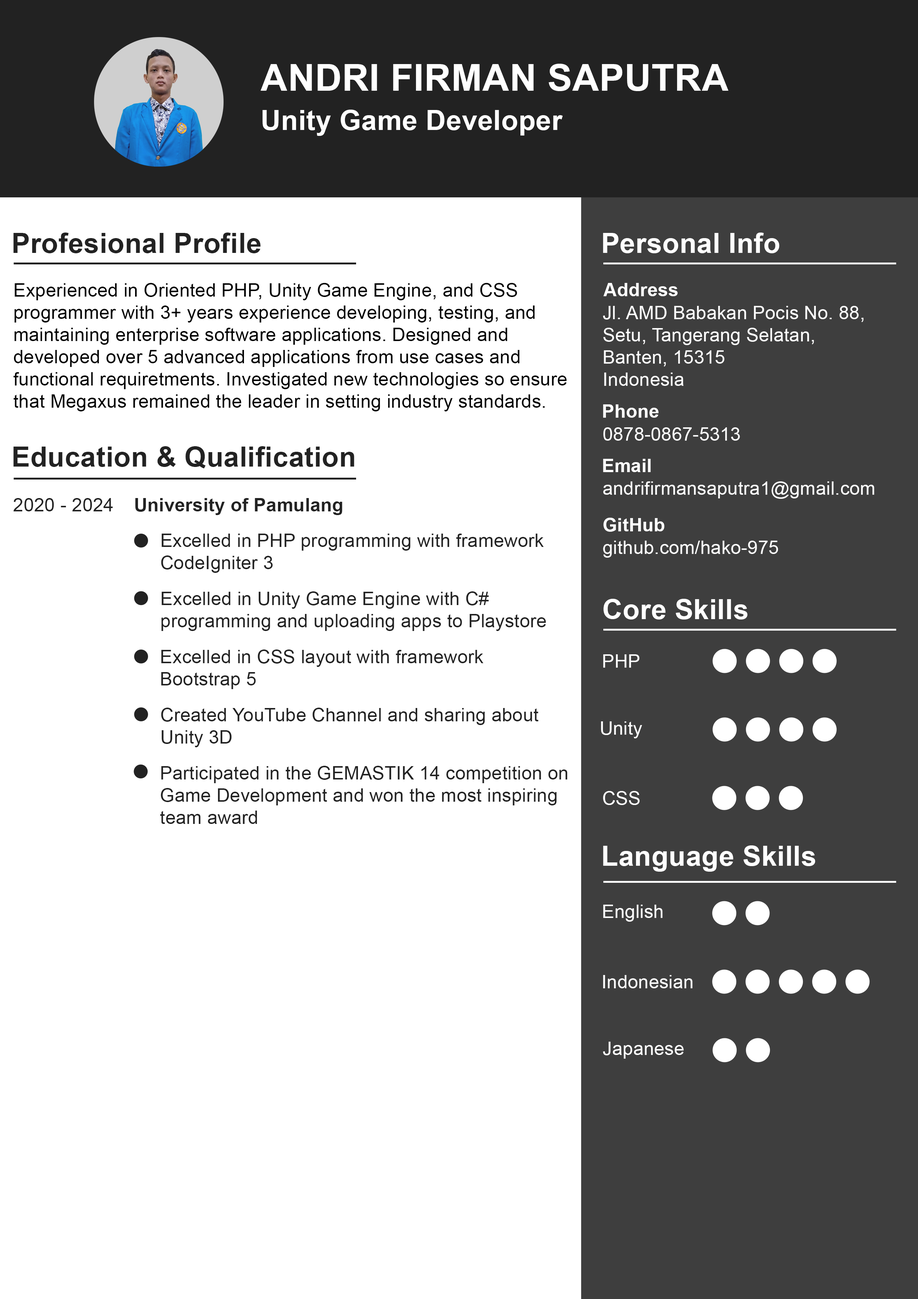
<style>
.page{position:relative;width:918px;height:1299px;background:#ffffff}
.page>*{position:absolute;margin:0}
.t1{font:37px "Arial-BoldMT";letter-spacing:0.01em;color:#ffffff}
.t2{font:27.8px "Arial-BoldMT";letter-spacing:0.01em;color:#ffffff}
.t3{font:27.8px "Arial-BoldMT";letter-spacing:0.01em;color:#222222}
.t4{font:18.5px "ArialMT";letter-spacing:0.01em;color:#000000}
.t5{font:18.5px "Arial-BoldMT";letter-spacing:0.01em;color:#ffffff}
.t6{font:18.5px "ArialMT";letter-spacing:0.01em;color:#ffffff}
.t7{font:18.5px "ArialMT";letter-spacing:0.01em;color:#222222}
.t8{font:18.5px "Arial-BoldMT";letter-spacing:0.01em;color:#222222}
</style>
<div class="page">
<p class="t1" style="left:261px;top:64px;width:468px;height:27px">ANDRI FIRMAN SAPUTRA</p>
<p class="t2" style="left:262px;top:110px;width:301px;height:26px">Unity Game Developer</p>
<p class="t3" style="left:13px;top:232px;width:248px;height:21px">Profesional Profile</p>
<p class="t2" style="left:603px;top:232px;width:177px;height:21px">Personal Info</p>
<p class="t4" style="left:13px;top:283px;width:554px;height:128px">Experienced in Oriented PHP, Unity Game Engine, and CSS <br>programmer with 3+ years experience developing, testing, and <br>maintaining enterprise software applications. Designed and <br>developed over 5 advanced applications from use cases and <br>functional requiretments. Investigated new technologies so ensure <br>that Megaxus remained the leader in setting industry standards.</p>
<p class="t5" style="left:603px;top:283px;width:75px;height:13px">Address</p>
<p class="t6" style="left:603px;top:306px;width:261px;height:80px">Jl. AMD Babakan Pocis No. 88, <br>Setu, Tangerang Selatan, <br>Banten, 15315<br>Indonesia</p>
<p class="t5" style="left:603px;top:404px;width:56px;height:14px">Phone</p>
<p class="t6" style="left:603px;top:427px;width:137px;height:14px">0878-0867-5313</p>
<p class="t3" style="left:13px;top:446px;width:341px;height:22px">Education &amp; Qualification</p>
<p class="t5" style="left:603px;top:459px;width:48px;height:13px">Email</p>
<p class="t6" style="left:603px;top:481px;width:271px;height:18px">andrifirmansaputra1@gmail.com</p>
<p class="t7" style="left:13px;top:498px;width:100px;height:13px">2020 - 2024</p>
<p class="t8" style="left:135px;top:498px;width:207px;height:17px">University of Pamulang</p>
<p class="t5" style="left:603px;top:518px;width:62px;height:14px">GitHub</p>
<p class="t7" style="left:161px;top:533px;width:383px;height:40px">Excelled in PHP programming with framework <br>CodeIgniter 3</p>
<p class="t6" style="left:603px;top:541px;width:175px;height:17px">github.com/hako-975</p>
<p class="t7" style="left:161px;top:591px;width:385px;height:40px">Excelled in Unity Game Engine with C# <br>programming and uploading apps to Playstore</p>
<p class="t2" style="left:603px;top:599px;width:145px;height:20px">Core Skills</p>
<p class="t7" style="left:161px;top:649px;width:323px;height:40px">Excelled in CSS layout with framework <br>Bootstrap 5</p>
<p class="t6" style="left:603px;top:654px;width:37px;height:14px">PHP</p>
<p class="t7" style="left:161px;top:707px;width:378px;height:40px">Created YouTube Channel and sharing about <br>Unity 3D</p>
<p class="t6" style="left:601px;top:721px;width:41px;height:17px">Unity</p>
<p class="t7" style="left:160px;top:766px;width:408px;height:58px">Participated in the GEMASTIK 14 competition on <br>Game Development and won the most inspiring <br>team award</p>
<p class="t6" style="left:603px;top:791px;width:37px;height:14px">CSS</p>
<p class="t2" style="left:603px;top:845px;width:213px;height:27px">Language Skills</p>
<p class="t6" style="left:603px;top:904px;width:60px;height:17px">English</p>
<p class="t6" style="left:603px;top:975px;width:90px;height:13px">Indonesian</p>
<p class="t6" style="left:603px;top:1041px;width:81px;height:17px">Japanese</p>
</div>
